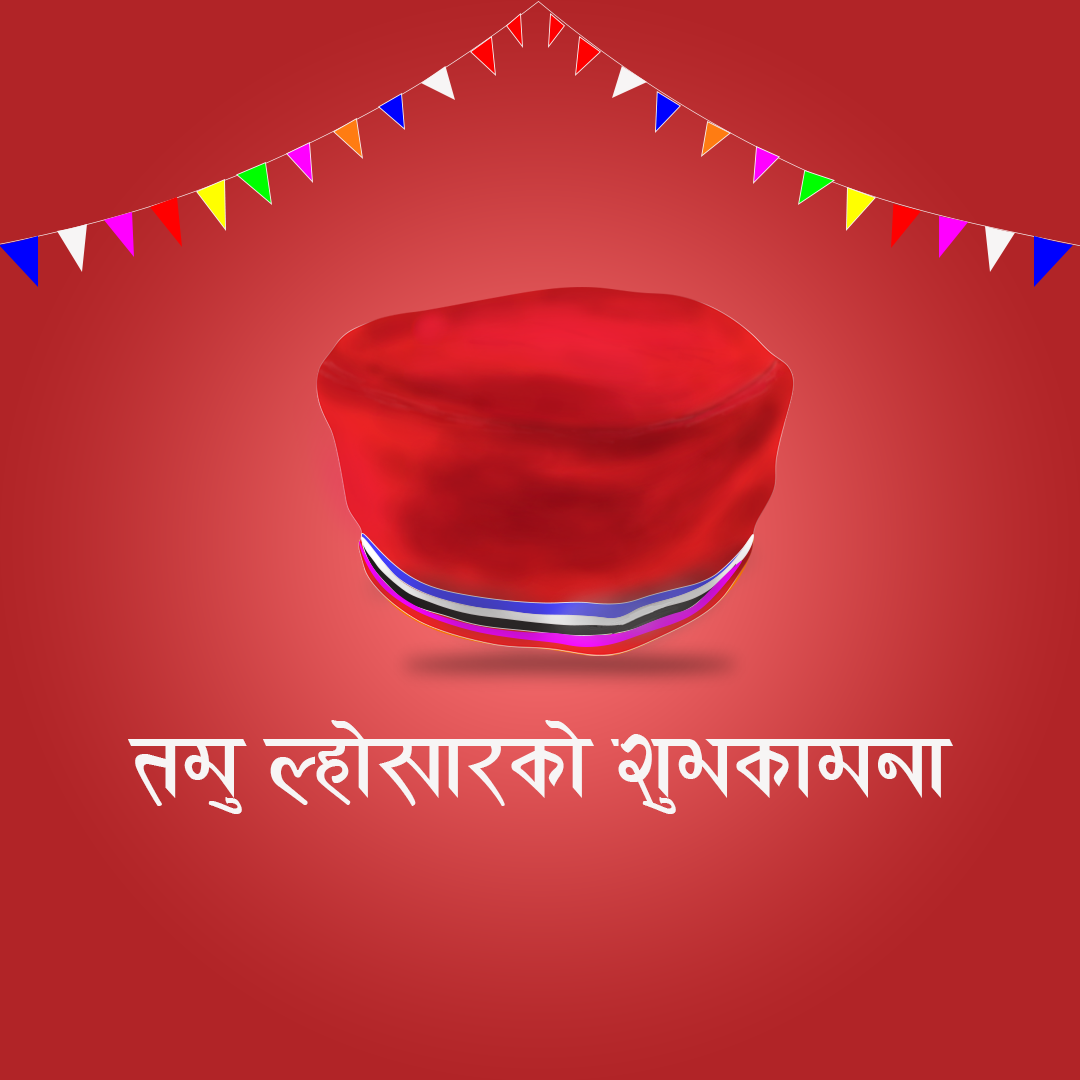
<style>
.page{position:relative;width:1080px;height:1080px;background:#b12427}
.page>*{position:absolute;margin:0}
.t1{font:100px "0017ARAP";color:#f7f5f5}
</style>
<div class="page">
<p class="t1" style="left:128px;top:720px;width:825px;height:94px">td' Nxf];f/sf] z'esfdgf</p>
</div>
